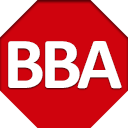
<style>
.page{position:relative;width:128px;height:128px;background:#cf030d}
.page>*{position:absolute;margin:0}
.t1{font:74px "Calibri-Bold";letter-spacing:-0.05em;color:#ffffff}
</style>
<div class="page">
<p class="t1" style="left:8px;top:41px;width:114px;height:48px">BBA</p>
</div>
